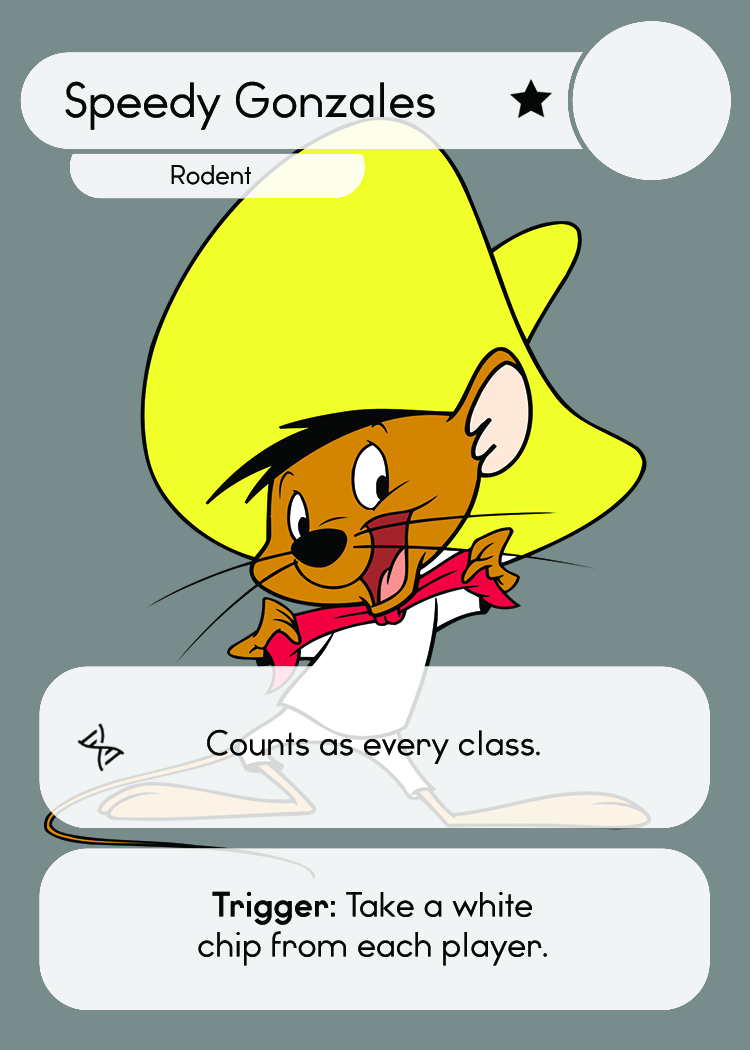
<style>
.page{position:relative;width:750px;height:1050px;background:#788c8c}
.page>*{position:absolute;margin:0}
.t1{font:46.7px "WatchwordRegularDemo";color:#060808}
.t2{font:25.5px "WatchwordRegularDemo";color:#060808}
.t3{font:33.3px "WatchwordRegularDemo";color:#060808}
.t4{font:33.3px "Dosis-Medium";color:#060808}
.t5{font:33.3px "WatchwordBoldDemo";color:#060808}
</style>
<div class="page">
<p class="t1" style="left:65px;top:81px;width:370px;height:49px">Speedy Gonzales</p>
<p class="t2" style="left:171px;top:165px;width:80px;height:20px">Rodent</p>
<p class="t3" style="left:207px;top:729px;width:333px;height:35px">Counts as every class<span class="t4">.</span></p>
<p class="t3" style="left:198px;top:891px;width:349px;height:75px;text-align:center"><span class="t5">Trigger: </span>Take a white<br>chip from each player<span class="t4">.</span></p>
</div>
